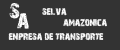
<style>
.page{position:relative;width:120px;height:50px;background:#333333}
.page>*{position:absolute;margin:0}
.t1{font:23px "28-Days-Later-Regular";color:#ffffff}
.t2{font:10px "28-Days-Later-Regular";color:#ffffff}
</style>
<div class="page">
<p class="t1" style="left:9px;top:3px;width:11px;height:16px">s</p>
<p class="t1" style="left:17px;top:13px;width:12px;height:16px">a</p>
<p class="t2" style="left:42px;top:8px;width:25px;height:8px">selva</p>
<p class="t2" style="left:63px;top:18px;width:44px;height:9px">amazonica</p>
<p class="t2" style="left:8px;top:32px;width:96px;height:9px">enpresa de transporte</p>
</div>
